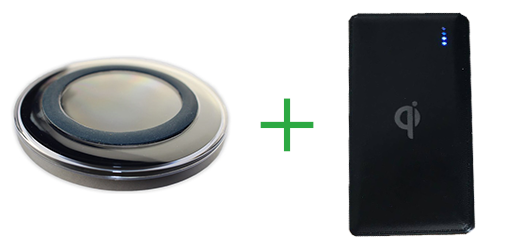
<style>
.page{position:relative;width:510px;height:250px;background:#ffffff}
.page>*{position:absolute;margin:0}
.t1{font:117.1px "SegoeUI-Semilight";color:#2ca942}
</style>
<div class="page">
<p class="t1" style="left:260px;top:98px;width:54px;height:54px">+</p>
</div>
